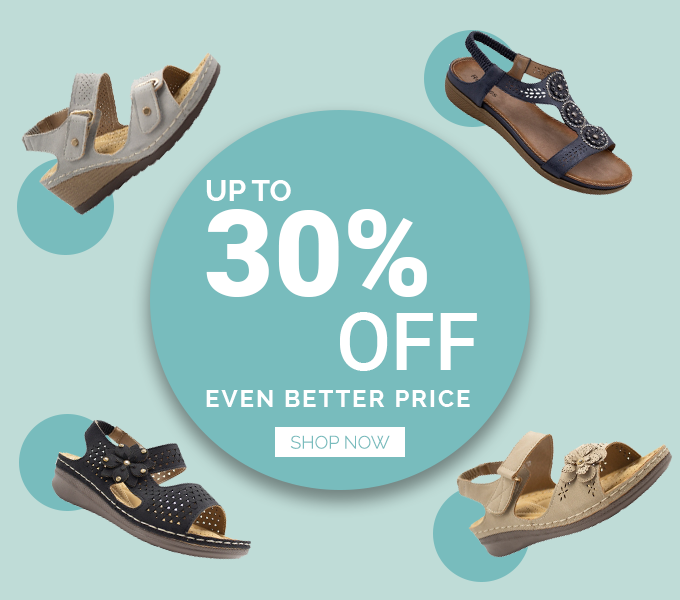
<style>
.page{position:relative;width:680px;height:600px;background:#bfdcd7}
.page>*{position:absolute;margin:0}
.t1{font:30px "Raleway-Bold";color:#ffffff}
.t2{font:120px "Roboto-Black";color:#ffffff}
.t3{font:80px "Roboto-Medium";color:#ffffff}
.t4{font:24px "Raleway-Bold";letter-spacing:0.08em;color:#ffffff}
.t5{font:18px "Raleway-Light";color:#78bcbd}
</style>
<div class="page">
<p class="t1" style="left:206px;top:180px;width:85px;height:21px">UP TO</p>
<p class="t2" style="left:206px;top:209px;width:221px;height:88px">30%</p>
<p class="t3" style="left:340px;top:312px;width:137px;height:59px">OFF</p>
<p class="t4" style="left:206px;top:390px;width:264px;height:17px">EVEN BETTER PRICE</p>
<p class="t5" style="left:290px;top:435px;width:100px;height:14px">SHOP NOW</p>
</div>
